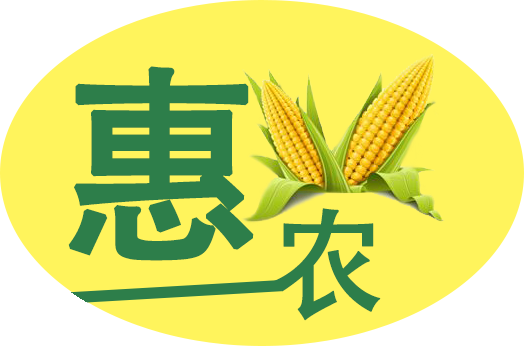
<style>
.page{position:relative;width:524px;height:346px;background:#fff45c}
.page>*{position:absolute;margin:0}
.t1{font:210px "AdobeHeitiStd-Regular";color:#2d7e4a;font-weight:bold}
.t2{font:120px "AdobeHeitiStd-Regular";color:#2d7e4a;font-weight:bold}
</style>
<div class="page">
<p class="t1" style="left:68px;top:66px;width:186px;height:195px">惠</p>
<p class="t2" style="left:273px;top:208px;width:108px;height:113px">农</p>
</div>
